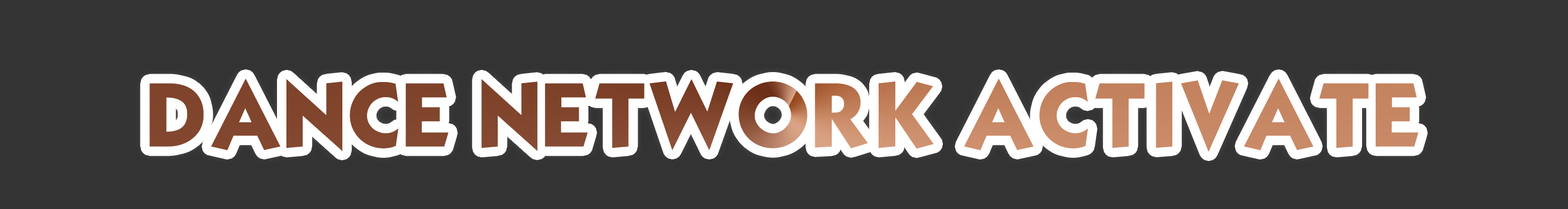
<style>
.page{position:relative;width:1568px;height:209px;background:#333333}
.page>*{position:absolute;margin:0}
.t1{font:78.4px "KabelBdNormal"}
</style>
<div class="page">
<p class="t1" style="left:149px;top:78px;width:1270px;height:74px">DANCE NETWORK ACTIVATE</p>
</div>
